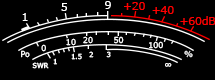
<style>
.page{position:relative;width:215px;height:80px;background:#000000}
.page>*{position:absolute;margin:0}
.t1{font:10.7px "Verdana";color:#ffffff}
.t2{font:10.7px "Verdana";color:#ff0000}
.t3{font:8px "Verdana";color:#ffffff}
.t4{font:6.7px "Verdana";color:#ffffff}
.t5{font:8px "Verdana"}
</style>
<div class="page">
<p class="t1" style="left:61px;top:3px;width:6px;height:8px">5</p>
<p class="t1" style="left:105px;top:1px;width:6px;height:8px">9</p>
<p class="t2" style="left:124px;top:2px;width:21px;height:8px">+20</p>
<p class="t2" style="left:152px;top:6px;width:22px;height:8px">+40</p>
<p class="t1" style="left:22px;top:13px;width:6px;height:8px">1</p>
<p class="t2" style="left:180px;top:16px;width:36px;height:9px">+60dB</p>
<p class="t3" style="left:66px;top:38px;width:10px;height:8px">10</p>
<p class="t3" style="left:83px;top:36px;width:10px;height:8px">20</p>
<p class="t3" style="left:114px;top:36px;width:10px;height:8px">50</p>
<p class="t3" style="left:149px;top:41px;width:14px;height:8px">100</p>
<p class="t3" style="left:21px;top:50px;width:9px;height:8px">Po</p>
<p class="t3" style="left:41px;top:44px;width:5px;height:8px">0</p>
<p class="t4" style="left:71px;top:53px;width:11px;height:7px">1.5</p>
<p class="t4" style="left:89px;top:51px;width:5px;height:7px">2</p>
<p class="t4" style="left:106px;top:51px;width:5px;height:7px">3</p>
<p class="t5" style="left:184px;top:50px;width:9px;height:8px">%</p>
<p class="t4" style="left:32px;top:62px;width:17px;height:7px">SWR</p>
<p class="t4" style="left:53px;top:58px;width:4px;height:7px">1</p>
<p class="t4" style="left:165px;top:63px;width:7px;height:4px">∞</p>
</div>
